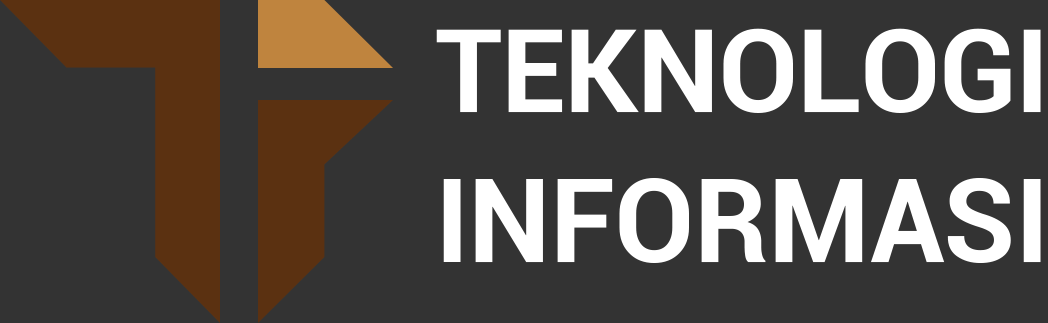
<style>
.page{position:relative;width:1048px;height:323px;background:#333333}
.page>*{position:absolute;margin:0}
.t1{font:116.3px "Roboto-Bold";letter-spacing:-0.01em;color:#ffffff}
.t2{font:117.2px "Roboto-Bold";letter-spacing:-0.01em;color:#ffffff}
</style>
<div class="page">
<p class="t1" style="left:436px;top:28px;width:605px;height:85px">TEKNOLOGI</p>
<p class="t2" style="left:443px;top:178px;width:598px;height:85px">INFORMASI</p>
</div>
